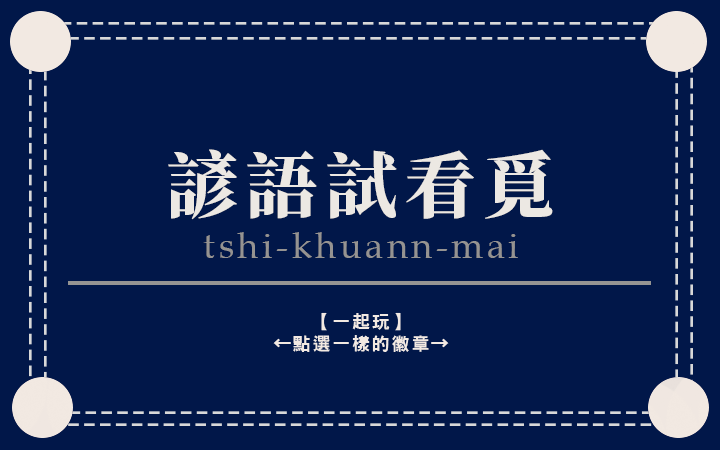
<style>
.page{position:relative;width:720px;height:450px;background:#011749}
.page>*{position:absolute;margin:0}
.t1{font:72px "SourceHanSerifTW-Heavy";letter-spacing:0.1em;color:#ece8e3}
.t2{font:36px "BookAntiqua";letter-spacing:0.1em;color:#959391}
.t3{font:18px "DFNHei-W9-WIN-BF";letter-spacing:0.1em;color:#f2e9e2}
</style>
<div class="page">
<p class="t1" style="left:168px;top:149px;width:385px;height:71px">諺語試看覓</p>
<p class="t2" style="left:203px;top:232px;width:315px;height:26px">tshi-khuann-mai</p>
<p class="t3" style="left:273px;top:312px;width:176px;height:40px;text-align:center">【一起玩】<br>←點選一樣的徽章→</p>
</div>
